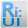
<style>
.page{position:relative;width:28px;height:28px}
.page>*{position:absolute;margin:0}
.t1{font:13.8px "MicrosoftNewTaiLue-Bold"}
.t2{font:20.6px "MicrosoftNewTaiLue-Bold"}
.t3{font:11.2px "MyriadPro-Semibold";color:#007fc9;scale:1.84 1}
</style>
<div class="page">
<p class="t1" style="left:2px;top:2px;width:20px;height:15px"><span class="t2">R</span>i:</p>
<p class="t3" style="left:3px;top:18px;width:17px;height:8px">UI</p>
</div>
